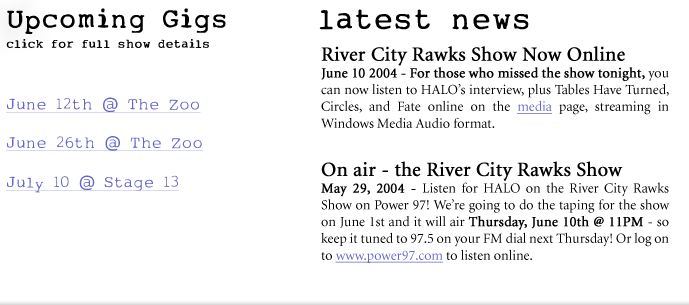
<style>
.page{position:relative;width:689px;height:305px;background:#ffffff}
.page>*{position:absolute;margin:0}
.t1{font:14px "Minion-Regular";color:#000000}
.t2{font:20px "Minion-Regular";color:#000000;font-weight:bold}
.t3{font:14px "Minion-Regular";color:#000000;font-weight:bold}
.t4{font:14px "Minion-Regular";color:#6766cc;text-decoration:underline}
.t5{font:16px "My-type-of-font";color:#6766cc;text-decoration:underline}
</style>
<div class="page">
<p class="t1" style="left:321px;top:46px;width:349px;height:217px;text-align:justify"><span class="t2">River City Rawks Show Now Online<br></span><span class="t3">June 10 2004 - For those who missed the show tonight, </span>you can now listen to HALO’s interview, plus Tables Have Turned, Circles, and Fate online on the <span class="t4">media </span>page, streaming in Windows Media Audio format. <span class="t2"><br><br>On air - the River City Rawks Show<br></span><span class="t3">May 29, 2004 - </span>Listen for HALO on the River City Rawks Show on Power 97! We’re going to do the taping for the show on June 1st and it will air <span class="t3">Thursday, June 10th @ 11PM </span>- so keep it tuned to 97.5 on your FM dial next Thursday! Or log on to <span class="t4">www.power97.com</span> to listen online.</p>
<p class="t5" style="left:6px;top:97px;width:197px;height:54px;text-align:justify">June 12th @ The Zoo<br><br>June 26th @ The Zoo</p>
</div>
